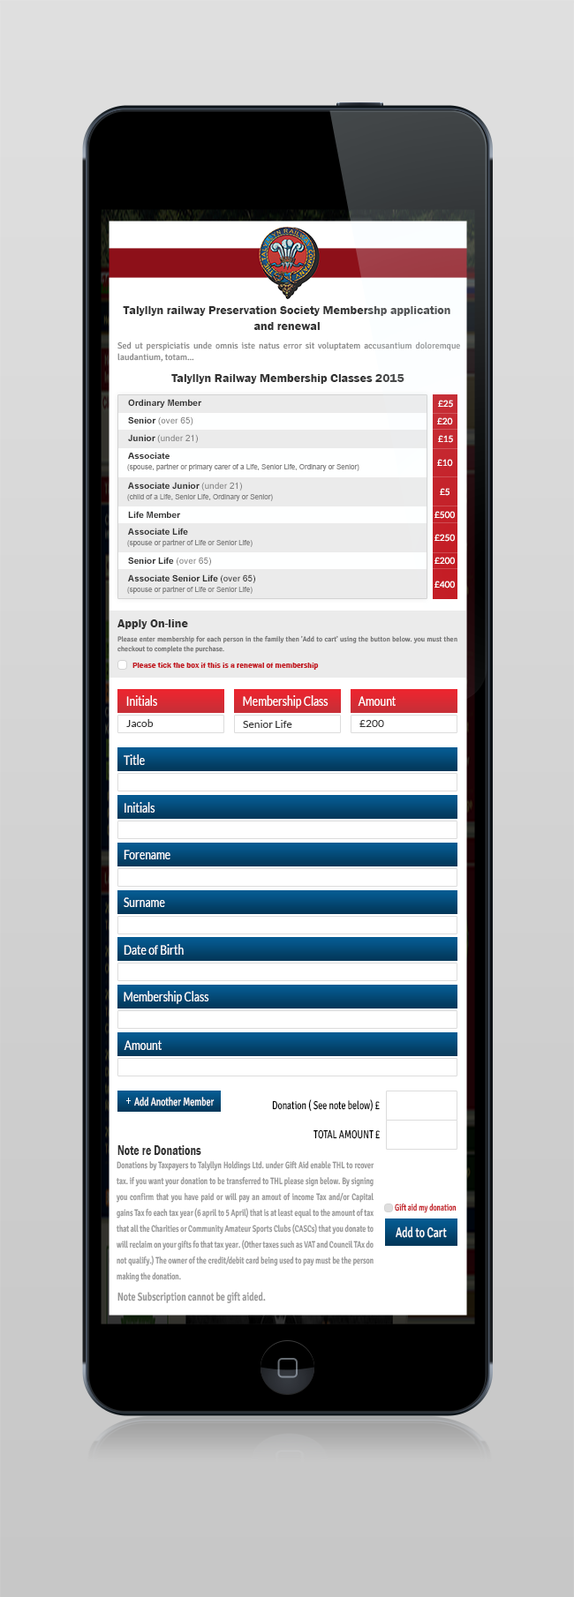
<style>
.page{position:relative;width:574px;height:1597px}
.page>*{position:absolute;margin:0}
.t1{font:12.4px "FranklinGothic-Demi";color:#333333}
.t2{font:12.4px/8.8px "FranklinGothic-Demi";color:#333333}
.t3{font:8.8px "SignikaNegative-Regular";color:#848484}
.t4{font:8.8px "Arial-BoldMT";color:#333333}
.t5{font:8.8px "Lato-Regular";color:#ffffff}
.t6{font:8.8px "ArialMT";color:#848484}
.t7{font:7.1px "ArialMT";color:#848484}
.t8{font:8.8px "ArialMT";color:#333333}
.t9{font:7.1px "SignikaNegative-Regular";color:#6e6e6e}
.t10{font:7.9px "FranklinGothic-Demi";color:#c31921}
.t11{font:13.8px "Lato-Regular";color:#ffffff;scale:0.77 1}
.t12{font:10.6px "Lato-Regular";color:#333333}
.t13{font:10.6px "Lato-Regular";color:#343333}
.t14{font:11.5px "ArialMT";color:#ffffff;scale:0.77 1}
.t15{font:11.5px "SignikaNegative-Regular";color:#ffffff;scale:0.77 1}
.t16{font:11.5px "SignikaNegative-Regular";color:#000000;scale:0.77 1}
.t17{font:13.8px "FranklinGothic-Demi";color:#333333;scale:0.77 1}
.t18{font:9.2px/15.9px "SignikaNegative-Semibold";color:#969696;scale:0.77 1}
.t19{font:9.2px "SignikaNegative-Semibold";color:#c41e26;scale:0.77 1}
.t20{font:13.8px "SignikaNegative-Regular";color:#ffffff;scale:0.77 1}
.t21{font:11.5px "SignikaNegative-Semibold";color:#969696;scale:0.77 1}
</style>
<div class="page">
<p class="t1" style="left:123px;top:306px;width:327px;height:24px;text-align:center">Talyllyn railway Preservation Society <span class="t2">Membershp application<br>and renewal</span></p>
<p class="t3" style="left:117px;top:341px;width:343px;height:21px;text-align:justify">Sed ut perspiciatis unde omnis iste natus error sit voluptatem accusantium doloremque laudantium, totam...</p>
<p class="t1" style="left:171px;top:374px;width:233px;height:10px">Talyllyn Railway Membership Classes 2015</p>
<p class="t4" style="left:128px;top:399px;width:74px;height:9px">Ordinary Member</p>
<p class="t5" style="left:438px;top:400px;width:15px;height:8px">£25</p>
<p class="t6" style="left:128px;top:416px;width:65px;height:9px"><span class="t4">Senior </span>(over 65)</p>
<p class="t5" style="left:437px;top:417px;width:16px;height:8px">£20</p>
<p class="t6" style="left:128px;top:434px;width:70px;height:9px"><span class="t4">Junior </span>(under 21)</p>
<p class="t5" style="left:438px;top:435px;width:15px;height:8px">£15</p>
<p class="t4" style="left:128px;top:453px;width:41px;height:6px">Associate</p>
<p class="t5" style="left:437px;top:459px;width:16px;height:8px">£10</p>
<p class="t7" style="left:127px;top:463px;width:232px;height:8px">(spouse, partner or primary carer of a Life, Senior Life, Ordinary or Senior)</p>
<p class="t4" style="left:128px;top:482px;width:114px;height:9px">Associate Junior <span class="t6">(under 21)</span></p>
<p class="t7" style="left:127px;top:494px;width:146px;height:7px">(child of a Life, Senior Life, Ordinary or Senior)</p>
<p class="t5" style="left:439px;top:488px;width:10px;height:8px">£5</p>
<p class="t4" style="left:128px;top:511px;width:53px;height:7px">Life Member</p>
<p class="t5" style="left:434px;top:511px;width:20px;height:8px">£500</p>
<p class="t4" style="left:128px;top:528px;width:60px;height:7px">Associate Life</p>
<p class="t5" style="left:434px;top:534px;width:20px;height:8px">£250</p>
<p class="t7" style="left:127px;top:539px;width:125px;height:8px">(spouse or partner of Life or Senior Life)</p>
<p class="t4" style="left:128px;top:557px;width:83px;height:9px">Senior Life <span class="t6">(over 65)</span></p>
<p class="t5" style="left:434px;top:557px;width:20px;height:8px">£200</p>
<p class="t4" style="left:128px;top:574px;width:127px;height:9px">Associate Senior Life <span class="t8">(over 65)</span></p>
<p class="t5" style="left:434px;top:581px;width:20px;height:8px">£400</p>
<p class="t7" style="left:127px;top:586px;width:125px;height:8px">(spouse or partner of Life or Senior Life)</p>
<p class="t1" style="left:117px;top:619px;width:71px;height:10px">Apply On-line</p>
<p class="t9" style="left:117px;top:635px;width:340px;height:18px;text-align:justify">Please enter membership for each person in the family then 'Add to cart' using the button below. you must then checkout to complete the purchase.</p>
<p class="t10" style="left:132px;top:663px;width:187px;height:7px">Please tick the box if this is a renewal of membership</p>
<p class="t11" style="left:126px;top:695px;width:31px;height:11px">Initials</p>
<p class="t11" style="left:243px;top:695px;width:85px;height:14px">Membership Class</p>
<p class="t11" style="left:357px;top:696px;width:38px;height:10px">Amount</p>
<p class="t12" style="left:126px;top:719px;width:28px;height:8px">Jacob</p>
<p class="t12" style="left:243px;top:720px;width:49px;height:8px">Senior Life</p>
<p class="t13" style="left:359px;top:720px;width:25px;height:7px">£200</p>
<p class="t11" style="left:124px;top:754px;width:21px;height:11px">Title</p>
<p class="t11" style="left:124px;top:802px;width:31px;height:11px">Initials</p>
<p class="t11" style="left:124px;top:850px;width:46px;height:9px">Forename</p>
<p class="t11" style="left:124px;top:897px;width:41px;height:10px">Surname</p>
<p class="t11" style="left:124px;top:944px;width:60px;height:11px">Date of Birth</p>
<p class="t11" style="left:124px;top:991px;width:85px;height:13px">Membership Class</p>
<p class="t11" style="left:124px;top:1040px;width:37px;height:10px">Amount</p>
<p class="t14" style="left:126px;top:1098px;width:5px;height:6px">+</p>
<p class="t15" style="left:134px;top:1097px;width:80px;height:9px">Add Another Member</p>
<p class="t16" style="left:272px;top:1099px;width:107px;height:13px">Donation ( See note below) £</p>
<p class="t16" style="left:313px;top:1129px;width:66px;height:10px">TOTAL AMOUNT £</p>
<p class="t17" style="left:117px;top:1145px;width:84px;height:10px">Note re Donations</p>
<p class="t18" style="left:116px;top:1161px;width:258px;height:121px;text-align:justify">Donations by Taxpayers to Talyllyn Holdings Ltd. under Gift Aid enable THL to rcover tax. if you want your donation to be transferred to THL please sign below. By signing you confirm that you have paid or will pay an amout of income Tax and/or Capital gains Tax fo each tax year (6 april to 5 April) that is at least equal to the amount of tax that all the Charities or Community Amateur Sports Clubs (CASCs) that you donate to will reclaim on your gifts fo that tax year. (Other taxes such as VAT and Council TAx do not qualify.) The owner of the credit/debit card being used to pay must be the person making the donation.</p>
<p class="t19" style="left:394px;top:1204px;width:62px;height:9px">Gift aid my donation</p>
<p class="t20" style="left:395px;top:1226px;width:51px;height:12px">Add to Cart</p>
<p class="t21" style="left:117px;top:1292px;width:149px;height:11px">Note Subscription cannot be gift aided.</p>
</div>
